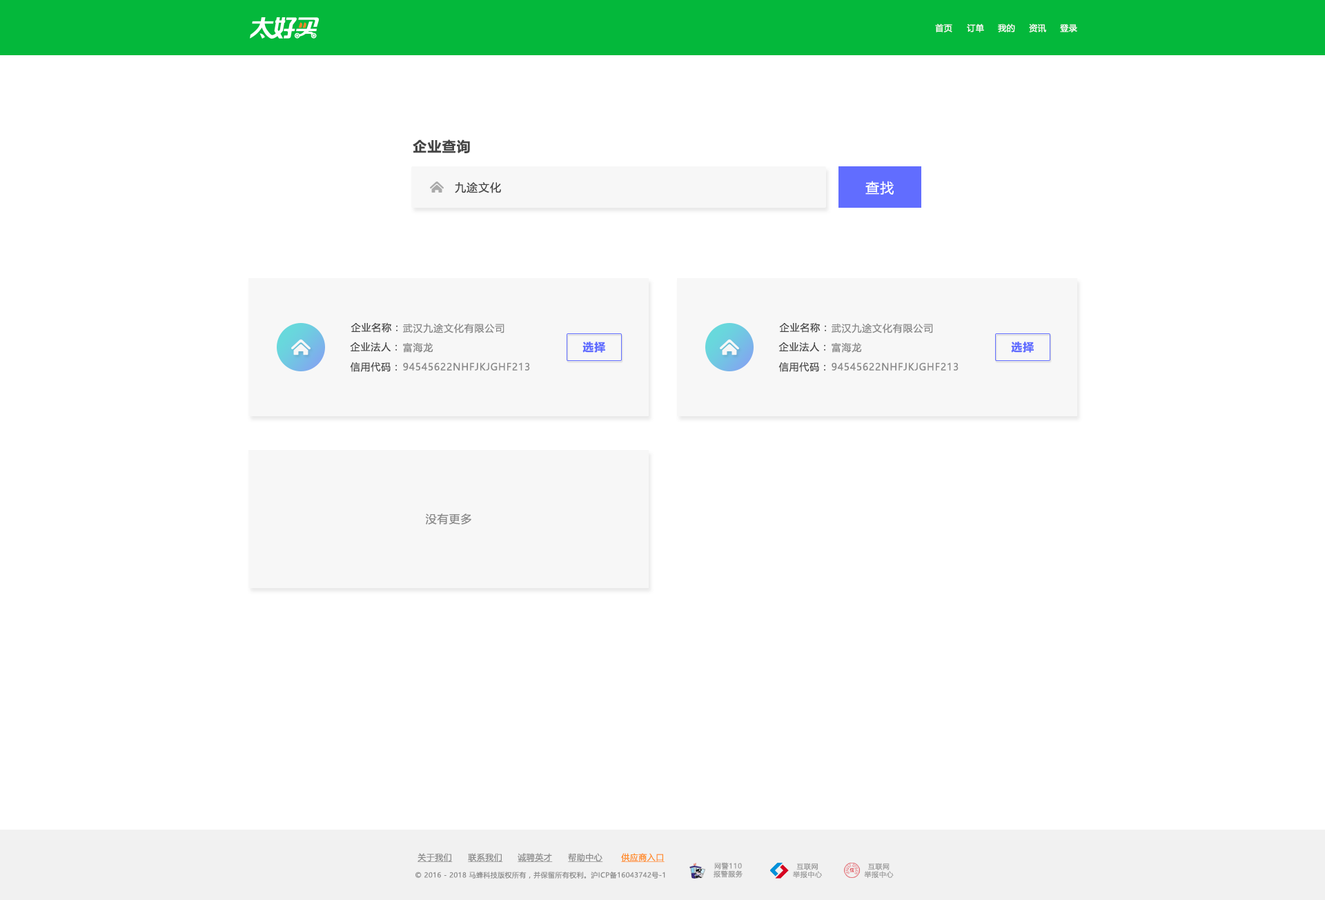
<style>
.page{position:relative;width:1325px;height:900px;background:#ffffff}
.page>*{position:absolute;margin:0}
.t1{font:8.3px "MicrosoftYaHeiUI";letter-spacing:0.04em;color:#ffffff}
.t2{font:13.8px "MicrosoftYaHeiUI-Bold";letter-spacing:0.06em;color:#444444}
.t3{font:11px "MicrosoftYaHeiUI";letter-spacing:0.06em;color:#444444}
.t4{font:13.8px "MicrosoftYaHeiUI";letter-spacing:0.06em;color:#ffffff}
.t5{font:9.7px "MicrosoftYaHeiUI";letter-spacing:0.06em;color:#444444}
.t6{font:9.7px "MicrosoftYaHeiUI";letter-spacing:0.06em;color:#888888}
.t7{font:11px "MicrosoftYaHeiUI-Bold";letter-spacing:0.06em;color:#616dff}
.t8{font:11px "MicrosoftYaHeiUI";letter-spacing:0.06em;color:#888888}
.t9{font:8.3px "MicrosoftYaHeiUI";letter-spacing:0.04em;color:#8c8c8c;text-decoration:underline}
.t10{font:8.3px "MicrosoftYaHeiUI";letter-spacing:0.04em;color:#ff8b25;text-decoration:underline}
.t11{font:6.9px/8px "MicrosoftYaHei";letter-spacing:0.06em;color:#999999}
.t12{font:6.9px "MicrosoftYaHeiUI";letter-spacing:0.04em;color:#8c8c8c}
</style>
<div class="page">
<p class="t1" style="left:935px;top:23px;width:17px;height:9px">首页</p>
<p class="t1" style="left:967px;top:23px;width:17px;height:9px">订单</p>
<p class="t1" style="left:998px;top:23px;width:17px;height:9px">我的</p>
<p class="t1" style="left:1029px;top:23px;width:17px;height:9px">资讯</p>
<p class="t1" style="left:1060px;top:24px;width:17px;height:8px">登录</p>
<p class="t2" style="left:413px;top:139px;width:57px;height:14px">企业查询</p>
<p class="t3" style="left:455px;top:182px;width:46px;height:11px">九途文化</p>
<p class="t4" style="left:865px;top:181px;width:29px;height:14px">查找</p>
<p class="t5" style="left:351px;top:322px;width:47px;height:11px">企业名称：</p>
<p class="t6" style="left:403px;top:323px;width:101px;height:10px">武汉九途文化有限公司</p>
<p class="t5" style="left:779px;top:322px;width:47px;height:11px">企业名称：</p>
<p class="t6" style="left:832px;top:323px;width:101px;height:10px">武汉九途文化有限公司</p>
<p class="t5" style="left:350px;top:342px;width:47px;height:10px">企业法人：</p>
<p class="t7" style="left:582px;top:342px;width:23px;height:11px">选择</p>
<p class="t5" style="left:778px;top:342px;width:47px;height:10px">企业法人：</p>
<p class="t7" style="left:1011px;top:342px;width:23px;height:11px">选择</p>
<p class="t6" style="left:403px;top:342px;width:30px;height:11px">富海龙</p>
<p class="t6" style="left:832px;top:342px;width:30px;height:11px">富海龙</p>
<p class="t5" style="left:350px;top:362px;width:47px;height:10px">信用代码：</p>
<p class="t6" style="left:403px;top:362px;width:127px;height:9px">94545622NHFJKJGHF213</p>
<p class="t5" style="left:778px;top:362px;width:47px;height:10px">信用代码：</p>
<p class="t6" style="left:832px;top:362px;width:127px;height:9px">94545622NHFJKJGHF213</p>
<p class="t8" style="left:425px;top:513px;width:46px;height:11px">没有更多</p>
<p class="t9" style="left:418px;top:853px;width:35px;height:9px">关于我们</p>
<p class="t9" style="left:468px;top:853px;width:35px;height:9px">联系我们</p>
<p class="t9" style="left:518px;top:853px;width:35px;height:9px">诚聘英才</p>
<p class="t9" style="left:568px;top:853px;width:35px;height:9px">帮助中心</p>
<p class="t10" style="left:621px;top:853px;width:44px;height:9px">供应商入口</p>
<p class="t11" style="left:714px;top:862px;width:29px;height:16px;text-align:center">网警110<br>报警服务</p>
<p class="t11" style="left:793px;top:863px;width:29px;height:15px;text-align:center">互联网<br>举报中心</p>
<p class="t11" style="left:864px;top:863px;width:30px;height:15px;text-align:center">互联网<br>举报中心</p>
<p class="t12" style="left:415px;top:871px;width:250px;height:8px">© 2016 - 2018 马蜂科技版权所有，并保留所有权利。沪ICP备16043742号-1</p>
</div>
